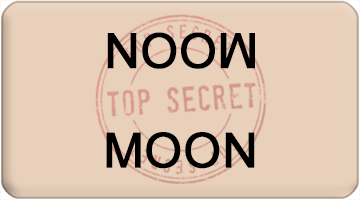
<style>
.page{position:relative;width:360px;height:200px;background:#e8d0bb}
.page>*{position:absolute;margin:0}
.t1{font:48px "ArialMT";color:#000000;font-weight:bold}
</style>
<div class="page">
<p class="t1" style="left:107px;top:32px;width:148px;height:37px;rotate:180deg">MOON</p>
<p class="t1" style="left:106px;top:132px;width:149px;height:37px">MOON</p>
</div>
